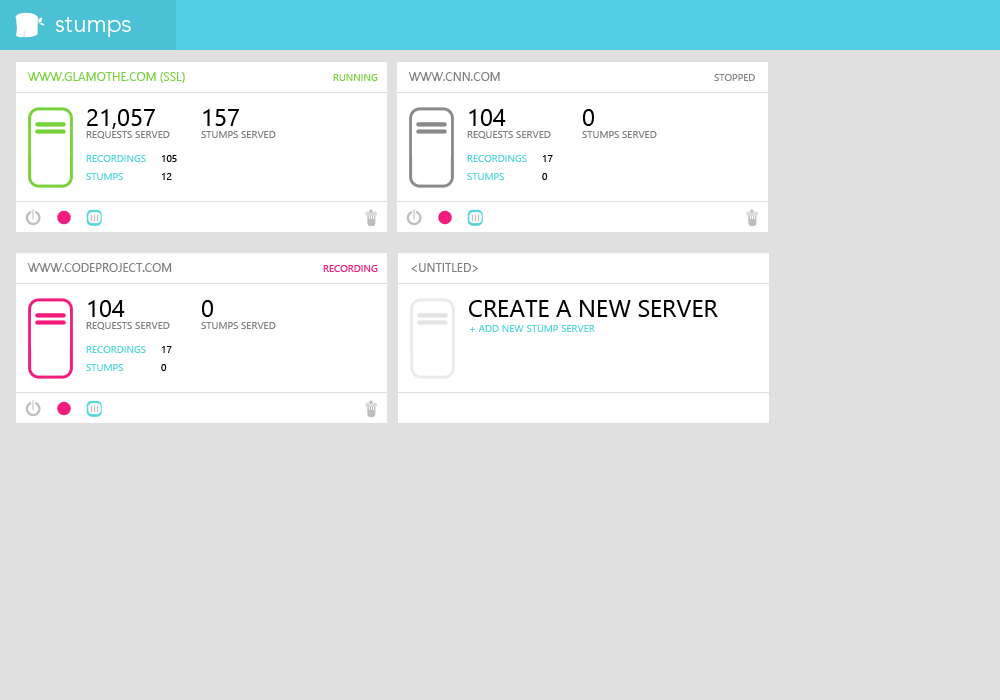
<style>
.page{position:relative;width:1000px;height:700px;background:#e0e0e0}
.page>*{position:absolute;margin:0}
.t1{font:24px "Avenir-Light";color:#ffffff}
.t2{font:12px "SegoeUI";color:#78d23b}
.t3{font:10px "SegoeUI";color:#78d23b}
.t4{font:12px "SegoeUI";color:#808080}
.t5{font:10px "SegoeUI";color:#8a8a8a}
.t6{font:24px "SegoeUI";color:#000000}
.t7{font:10px "SegoeUI";color:#808080}
.t8{font:10px/18px "SegoeUI";color:#54d5d9}
.t9{font:10px/18px "SegoeUI";color:#000000}
.t10{font:10px "SegoeUI";color:#f21c7c}
.t11{font:10px "SegoeUI";color:#54d5d9}
</style>
<div class="page">
<p class="t1" style="left:55px;top:16px;width:76px;height:21px">stumps</p>
<p class="t2" style="left:27px;top:72px;width:158px;height:11px">WWW.GLAMOTHE.COM (SSL)</p>
<p class="t3" style="left:333px;top:74px;width:45px;height:7px">RUNNING</p>
<p class="t4" style="left:408px;top:72px;width:92px;height:9px">WWW.CNN.COM</p>
<p class="t5" style="left:714px;top:74px;width:41px;height:7px">STOPPED</p>
<p class="t6" style="left:87px;top:109px;width:68px;height:20px">21,057</p>
<p class="t6" style="left:203px;top:109px;width:36px;height:17px">157</p>
<p class="t6" style="left:469px;top:109px;width:37px;height:17px">104</p>
<p class="t6" style="left:582px;top:109px;width:13px;height:17px">0</p>
<p class="t7" style="left:86px;top:131px;width:84px;height:8px">REQUESTS SERVED</p>
<p class="t7" style="left:201px;top:131px;width:75px;height:7px">STUMPS SERVED</p>
<p class="t7" style="left:467px;top:131px;width:84px;height:8px">REQUESTS SERVED</p>
<p class="t7" style="left:582px;top:131px;width:75px;height:7px">STUMPS SERVED</p>
<p class="t8" style="left:86px;top:155px;width:60px;height:25px">RECORDINGS<br>STUMPS</p>
<p class="t9" style="left:162px;top:155px;width:15px;height:25px">105<br>12</p>
<p class="t8" style="left:467px;top:155px;width:60px;height:25px">RECORDINGS<br>STUMPS</p>
<p class="t9" style="left:542px;top:155px;width:11px;height:25px">17<br>0</p>
<p class="t4" style="left:27px;top:263px;width:145px;height:9px">WWW.CODEPROJECT.COM</p>
<p class="t10" style="left:323px;top:265px;width:55px;height:7px">RECORDING</p>
<p class="t4" style="left:411px;top:263px;width:67px;height:9px">&lt;UNTITLED&gt;</p>
<p class="t6" style="left:88px;top:300px;width:37px;height:17px">104</p>
<p class="t6" style="left:201px;top:300px;width:13px;height:17px">0</p>
<p class="t6" style="left:469px;top:300px;width:249px;height:17px">CREATE A NEW SERVER</p>
<p class="t7" style="left:86px;top:322px;width:84px;height:8px">REQUESTS SERVED</p>
<p class="t7" style="left:201px;top:322px;width:75px;height:7px">STUMPS SERVED</p>
<p class="t11" style="left:470px;top:325px;width:125px;height:7px">+ ADD NEW STUMP SERVER</p>
<p class="t8" style="left:86px;top:346px;width:60px;height:25px">RECORDINGS<br>STUMPS</p>
<p class="t9" style="left:161px;top:346px;width:11px;height:25px">17<br>0</p>
</div>
